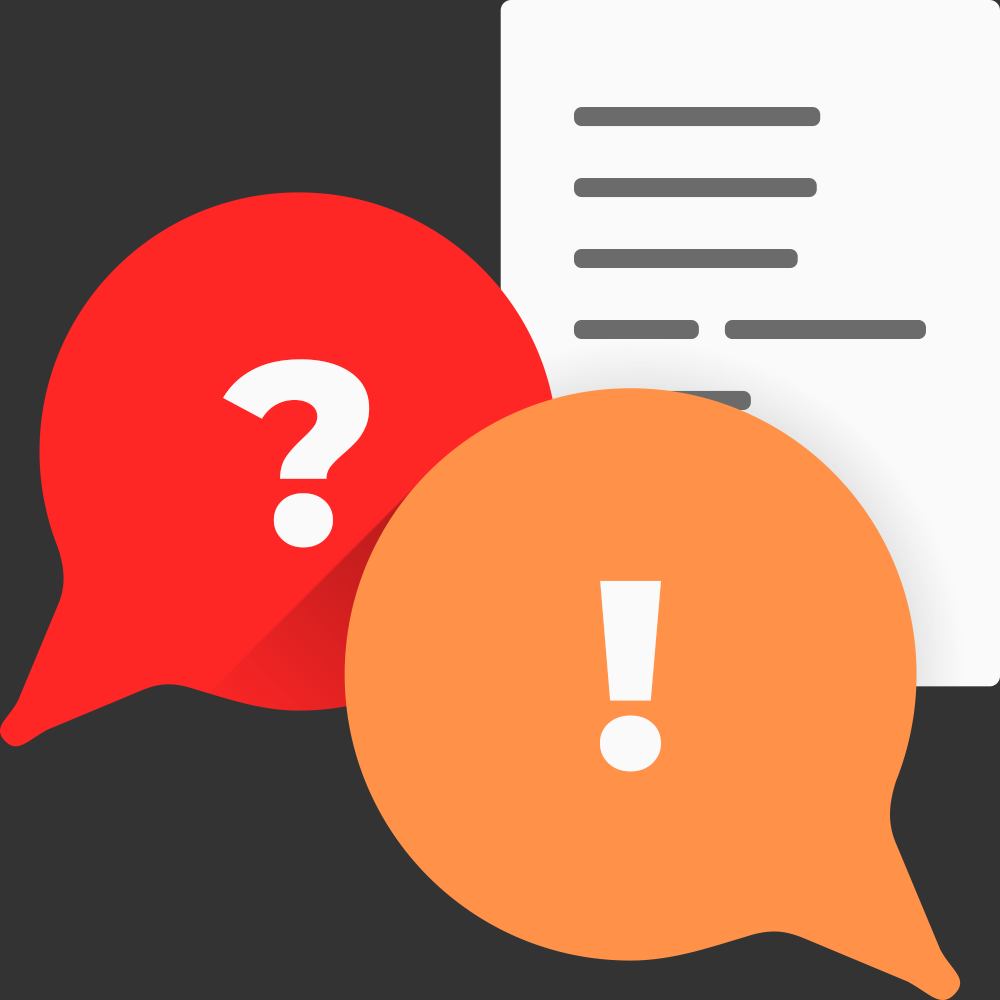
<style>
.page{position:relative;width:1000px;height:1000px;background:#333333}
.page>*{position:absolute;margin:0}
.t1{font:260px "Montserrat-ExtraBold";color:#fafafa}
.t2{font:268.6px "Montserrat-ExtraBold";color:#fafafa}
</style>
<div class="page">
<p class="t1" style="left:223px;top:359px;width:147px;height:189px">?</p>
<p class="t2" style="left:599px;top:580px;width:62px;height:192px">!</p>
</div>
